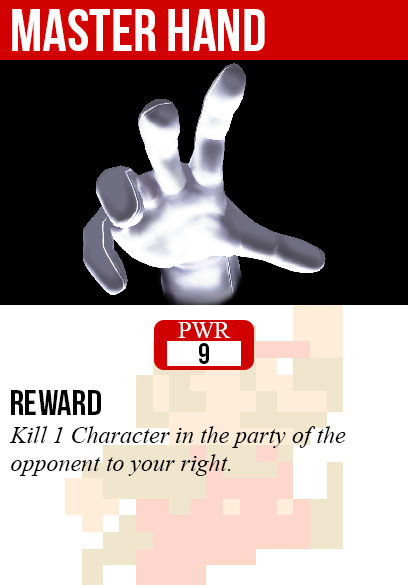
<style>
.page{position:relative;width:408px;height:585px;background:#000000}
.page>*{position:absolute;margin:0}
.t1{font:60px "BebasNeue";color:#ffffff}
.t2{font:24px "TimesNewRomanPSMT";color:#ffffff}
.t3{font:30px "BebasNeue";color:#000000}
.t4{font:36px "BebasNeue";color:#000000}
.t5{font:24px "TimesNewRomanPS-ItalicMT";color:#000000}
</style>
<div class="page">
<p class="t1" style="left:12px;top:9px;width:253px;height:42px">master hand</p>
<p class="t2" style="left:178px;top:322px;width:53px;height:16px">PWR</p>
<p class="t3" style="left:199px;top:343px;width:10px;height:21px">9</p>
<p class="t4" style="left:11px;top:390px;width:90px;height:25px">reward</p>
<p class="t5" style="left:9px;top:426px;width:337px;height:50px">Kill 1 Character in the party of the<br>opponent to your right.</p>
</div>
